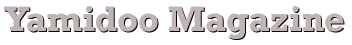
<style>
.page{position:relative;width:352px;height:45px;background:#ffffff}
.page>*{position:absolute;margin:0}
.t1{font:36px "Rockwell-Bold";color:#bfb5b5}
</style>
<div class="page">
<p class="t1" style="left:4px;top:6px;width:340px;height:33px">Yamidoo Magazine</p>
<p class="t1" style="left:5px;top:7px;width:340px;height:33px">Yamidoo Magazine</p>
</div>
